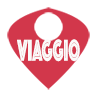
<style>
.page{position:relative;width:96px;height:96px;background:#ffffff}
.page>*{position:absolute;margin:0}
.t1{font:31.2px "Phosphate-Inline";letter-spacing:0.01em;color:#fbfafa;scale:0.5 1}
</style>
<div class="page">
<p class="t1" style="left:17px;top:39px;width:63px;height:23px">VIAGGIO</p>
</div>
